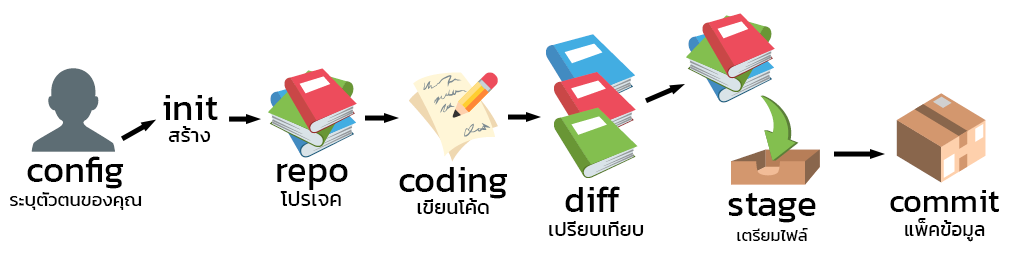
<style>
.page{position:relative;width:1011px;height:254px;background:#ffffff}
.page>*{position:absolute;margin:0}
.t1{font:36.4px "Kanit-Regular";color:#000000}
.t2{font:20px "Kanit-Regular";color:#000000}
.t3{font:36.5px "Kanit-Regular";color:#000000}
.t4{font:18.6px "Kanit-Regular";color:#000000}
.t5{font:21px "Kanit-Regular";color:#000000}
.t6{font:20.1px "Kanit-Regular";color:#000000}
.t7{font:37.1px "Kanit-Regular";color:#000000}
.t8{font:32.7px "Kanit-Regular";color:#000000}
.t9{font:19.3px "Kanit-Regular";color:#000000}
.t10{font:16.7px "Kanit-Regular";color:#000000}
</style>
<div class="page">
<p class="t1" style="left:163px;top:95px;width:55px;height:25px">init</p>
<p class="t2" style="left:168px;top:126px;width:43px;height:16px">สร้าง</p>
<p class="t3" style="left:27px;top:156px;width:97px;height:33px">config</p>
<p class="t3" style="left:277px;top:163px;width:71px;height:27px">repo</p>
<p class="t3" style="left:399px;top:167px;width:108px;height:32px">coding</p>
<p class="t4" style="left:10px;top:192px;width:132px;height:18px">ระบุตัวตนของคุณ</p>
<p class="t5" style="left:280px;top:191px;width:61px;height:15px">โปรเจค</p>
<p class="t6" style="left:417px;top:198px;width:72px;height:16px">เขียนโค้ด</p>
<p class="t3" style="left:565px;top:186px;width:55px;height:26px">diff</p>
<p class="t7" style="left:728px;top:192px;width:88px;height:31px">stage</p>
<p class="t8" style="left:890px;top:190px;width:109px;height:22px">commit</p>
<p class="t6" style="left:549px;top:221px;width:95px;height:15px">เปรียบเทียบ</p>
<p class="t9" style="left:905px;top:218px;width:80px;height:24px">แพ็คข้อมูล</p>
<p class="t10" style="left:737px;top:228px;width:71px;height:13px">เตรียมไฟล์</p>
</div>
